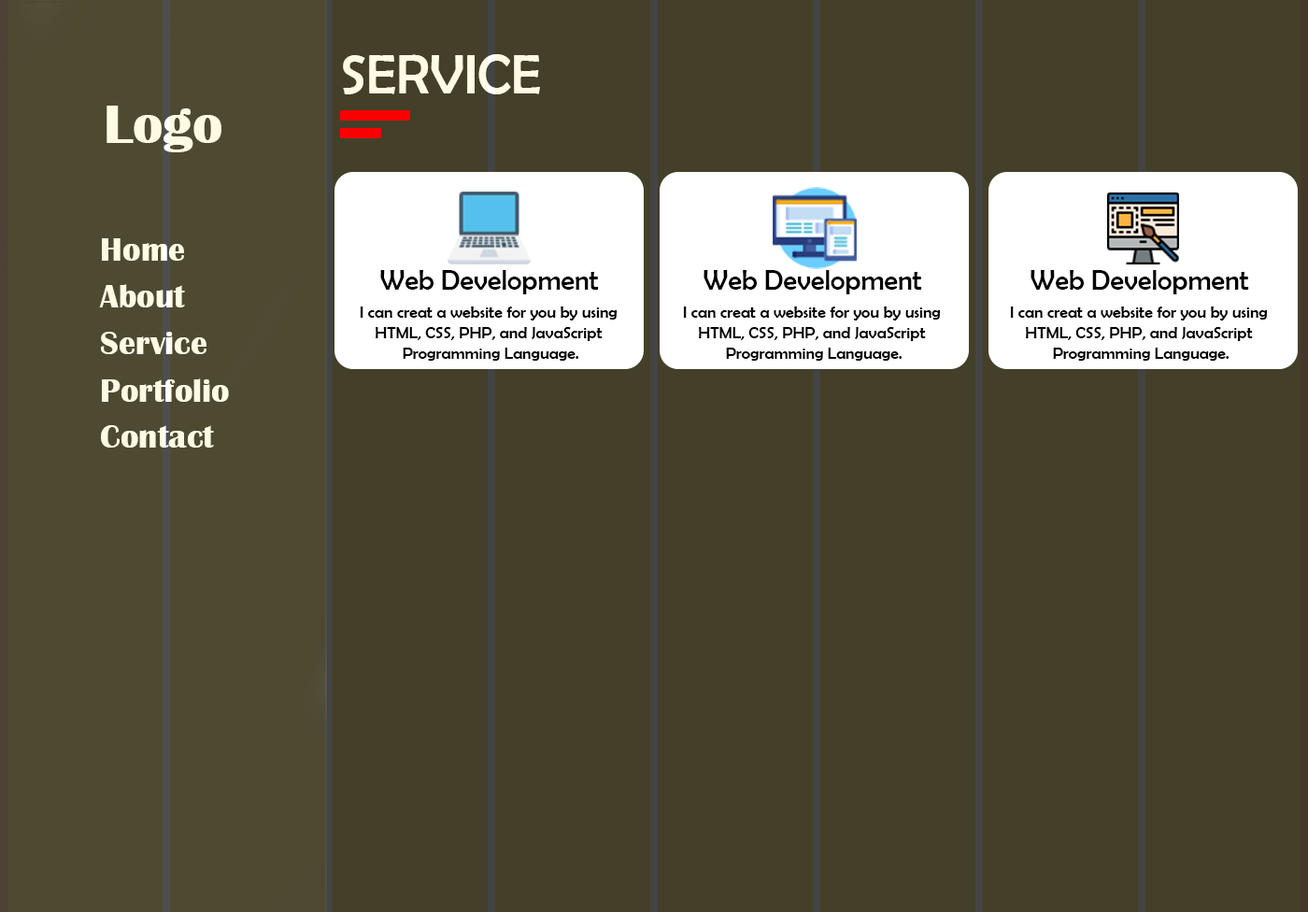
<style>
.page{position:relative;width:1308px;height:912px;background:#443f28}
.page>*{position:absolute;margin:0}
.t1{font:56.1px "BerlinSansFB-Reg";color:#fffae3}
.t2{font:56.1px "BritannicBold";color:#fffae3}
.t3{font:33.6px "BritannicBold";color:#fffae3}
.t4{font:28px "BerlinSansFB-Reg";color:#000000}
.t5{font:16.8px "BerlinSansFB-Reg";color:#000000}
</style>
<div class="page">
<p class="t1" style="left:343px;top:54px;width:197px;height:40px">SERVICE</p>
<p class="t2" style="left:106px;top:106px;width:115px;height:46px">Logo</p>
<p class="t3" style="left:102px;top:238px;width:82px;height:23px">Home</p>
<p class="t4" style="left:380px;top:270px;width:219px;height:24px">Web Development</p>
<p class="t4" style="left:703px;top:270px;width:219px;height:24px">Web Development</p>
<p class="t4" style="left:1030px;top:270px;width:219px;height:24px">Web Development</p>
<p class="t3" style="left:99px;top:284px;width:86px;height:23px">About</p>
<p class="t5" style="left:360px;top:306px;width:257px;height:55px;text-align:center">I can creat a website for you by using <br>HTML, CSS, PHP, and JavaScript <br>Programming Language.</p>
<p class="t5" style="left:683px;top:306px;width:258px;height:55px;text-align:center">I can creat a website for you by using <br>HTML, CSS, PHP, and JavaScript <br>Programming Language.</p>
<p class="t5" style="left:1010px;top:306px;width:258px;height:55px;text-align:center">I can creat a website for you by using <br>HTML, CSS, PHP, and JavaScript <br>Programming Language.</p>
<p class="t3" style="left:101px;top:332px;width:105px;height:22px">Service</p>
<p class="t3" style="left:102px;top:378px;width:127px;height:24px">Portfolio</p>
<p class="t3" style="left:101px;top:425px;width:113px;height:22px">Contact</p>
</div>
